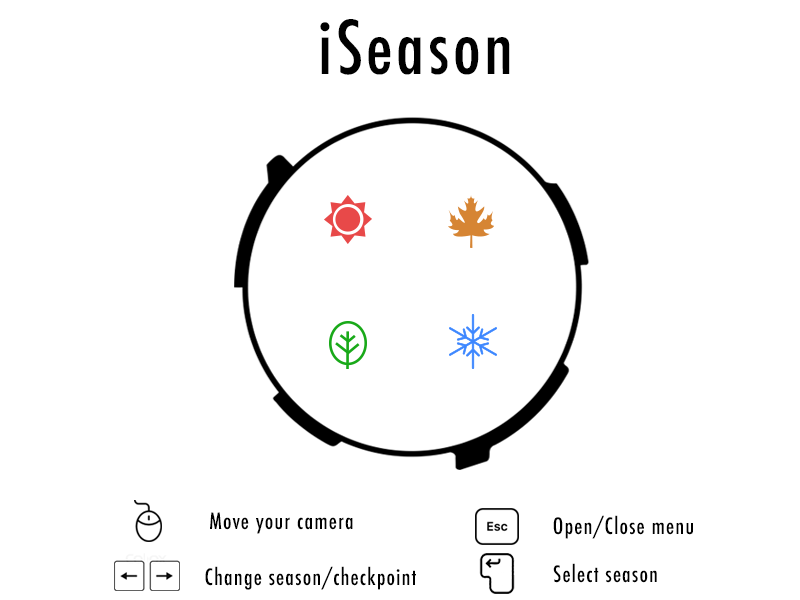
<style>
.page{position:relative;width:800px;height:600px;background:#ffffff}
.page>*{position:absolute;margin:0}
.t1{font:72px "Futura-CondensedMedium";letter-spacing:0.05em;color:#000000}
.t2{font:22px "Futura-CondensedMedium";letter-spacing:0.05em;color:#000000}
</style>
<div class="page">
<p class="t1" style="left:320px;top:19px;width:190px;height:56px">iSeason</p>
<p class="t2" style="left:210px;top:512px;width:143px;height:22px">Move your camera</p>
<p class="t2" style="left:553px;top:515px;width:140px;height:24px">Open/Close menu</p>
<p class="t2" style="left:205px;top:566px;width:211px;height:24px">Change season/checkpoint</p>
<p class="t2" style="left:553px;top:563px;width:104px;height:20px">Select season</p>
</div>
